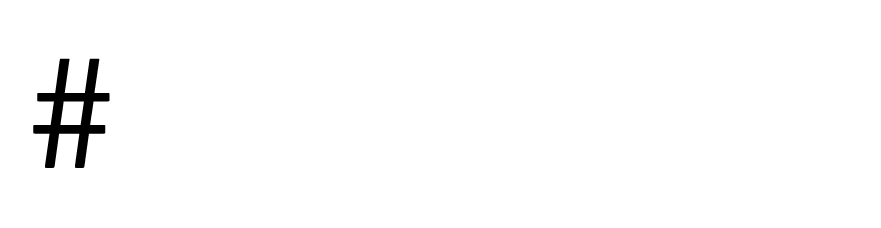
<style>
.page{position:relative;width:881px;height:228px;background:#ffffff}
.page>*{position:absolute;margin:0}
.t1{font:147px "NanumGothic";letter-spacing:-0.02em;color:#000000}
</style>
<div class="page">
<p class="t1" style="left:33px;top:58px;width:77px;height:110px">#</p>
</div>
